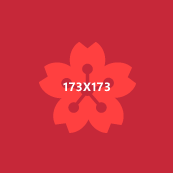
<style>
.page{position:relative;width:173px;height:173px;background:#c62839}
.page>*{position:absolute;margin:0}
.t1{font:12px "SegoeWP-Bold";letter-spacing:0.025em;color:#ffffff;text-transform:uppercase}
</style>
<div class="page">
<p class="t1" style="left:63px;top:82px;width:47px;height:10px">173x173</p>
</div>
